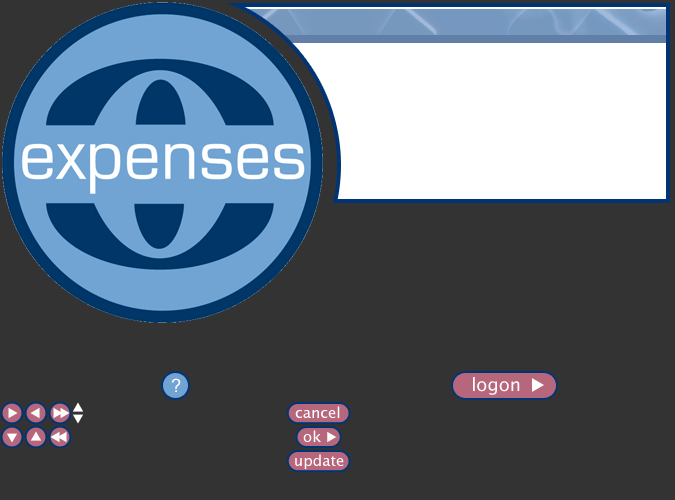
<style>
.page{position:relative;width:675px;height:500px;background:#333333}
.page>*{position:absolute;margin:0}
.t1{font:18px "LucidaSansUnicode";color:#ffffff}
.t2{font:18px "MicrosoftSansSerif";color:#ffffff}
.t3{font:15px "LucidaSansUnicode";color:#ffffff}
</style>
<div class="page">
<p class="t1" style="left:473px;top:377px;width:47px;height:18px">logon</p>
<p class="t2" style="left:171px;top:378px;width:10px;height:14px">?</p>
<p class="t3" style="left:295px;top:406px;width:45px;height:12px">cancel</p>
<p class="t3" style="left:303px;top:430px;width:18px;height:12px">ok</p>
<p class="t3" style="left:295px;top:454px;width:49px;height:15px">update</p>
</div>
